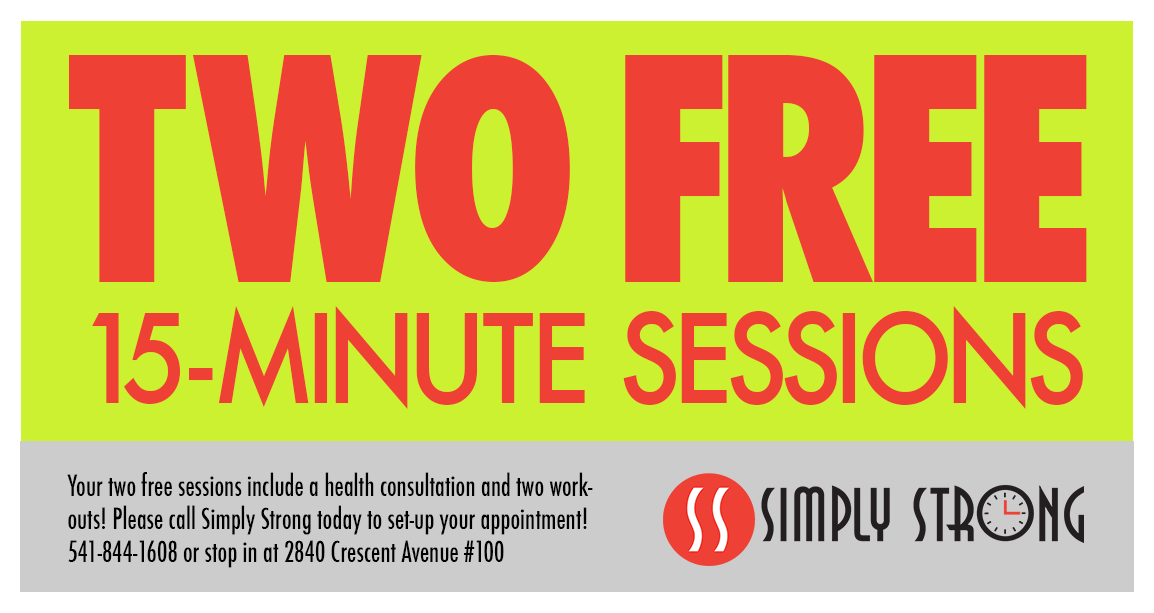
<style>
.page{position:relative;width:1154px;height:613px;background:#ccf130}
.page>*{position:absolute;margin:0}
.t1{font:300px "Futura-CondensedExtraBold";color:#ef4036;scale:0.9 1}
.t2{font:120px "Futura-Medium";color:#ef4036;scale:0.9 1}
.t3{font:28px/33px "Futura-CondensedMedium";color:#010101;scale:0.9 1}
</style>
<div class="page">
<p class="t1" style="left:69px;top:55px;width:1018px;height:227px">TWO FREE</p>
<p class="t2" style="left:92px;top:306px;width:991px;height:103px">15-MINUTE SESSIONS</p>
<p class="t3" style="left:67px;top:472px;width:526px;height:96px">Your two free sessions include a health consultation and two workouts! Please call Simply Strong today to set-up your appointment! 541-844-1608 or stop in at 2840 Crescent Avenue #100</p>
</div>
